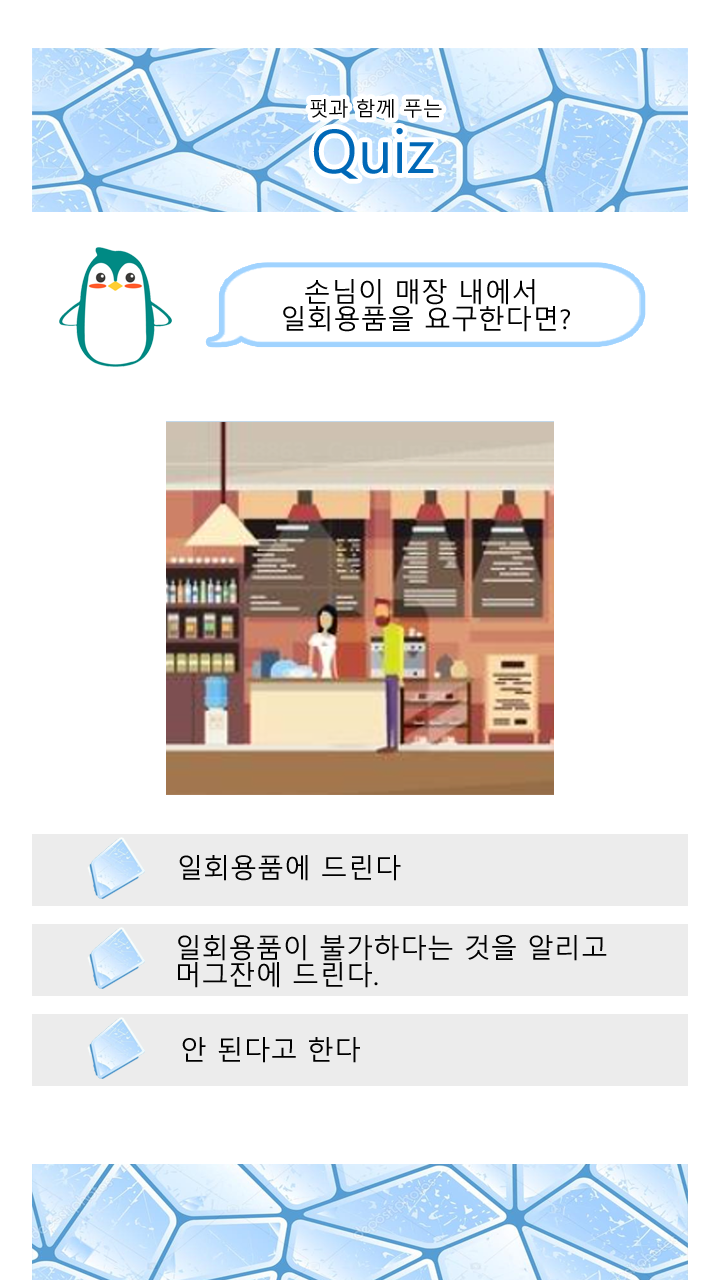
<style>
.page{position:relative;width:720px;height:1280px;background:#ffffff}
.page>*{position:absolute;margin:0}
.t1{font:20px/24px "MalgunGothic";color:#000000}
.t2{font:20px/26px "MalgunGothic";color:#000000}
.t3{font:60px/24px "MalgunGothic";color:#0068b7}
.t4{font:27px/27px "MalgunGothic";color:#000000}
.t5{font:27px "MalgunGothic";color:#000000}
</style>
<div class="page">
<p class="t1" style="left:310px;top:99px;width:132px;height:80px;text-align:center"><span class="t2">  </span>펏과 함께 푸는 <br><span class="t3">Quiz</span></p>
<p class="t4" style="left:283px;top:279px;width:287px;height:53px;text-align:center">손님이 매장 내에서 <br>일회용품을 요구한다면?</p>
<p class="t5" style="left:179px;top:855px;width:222px;height:26px">일회용품에 드린다</p>
<p class="t4" style="left:178px;top:935px;width:429px;height:53px">일회용품이 불가하다는 것을 알리고<br>머그잔에 드린다.</p>
<p class="t5" style="left:182px;top:1037px;width:178px;height:26px">안 된다고 한다</p>
</div>
